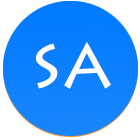
<style>
.page{position:relative;width:140px;height:140px;background:#ffffff}
.page>*{position:absolute;margin:0}
.t1{font:60px "LithosPro-Regular";color:#ffffff;font-weight:bold}
</style>
<div class="page">
<p class="t1" style="left:36px;top:42px;width:75px;height:47px">SA</p>
</div>
